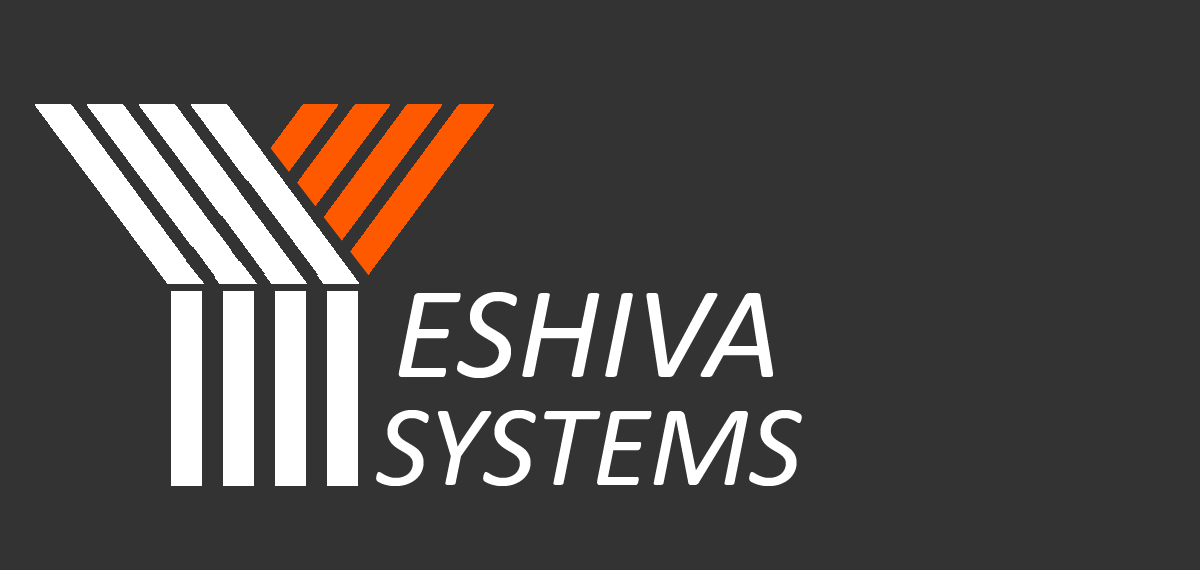
<style>
.page{position:relative;width:1200px;height:570px;background:#333333}
.page>*{position:absolute;margin:0}
.t1{font:133.3px "Calibri-Italic";color:#ffffff}
.t2{font:116.7px "Calibri-Italic";color:#ffffff}
</style>
<div class="page">
<p class="t1" style="left:398px;top:292px;width:375px;height:86px">ESHIVA</p>
<p class="t2" style="left:376px;top:410px;width:426px;height:76px">SYSTEMS</p>
</div>
